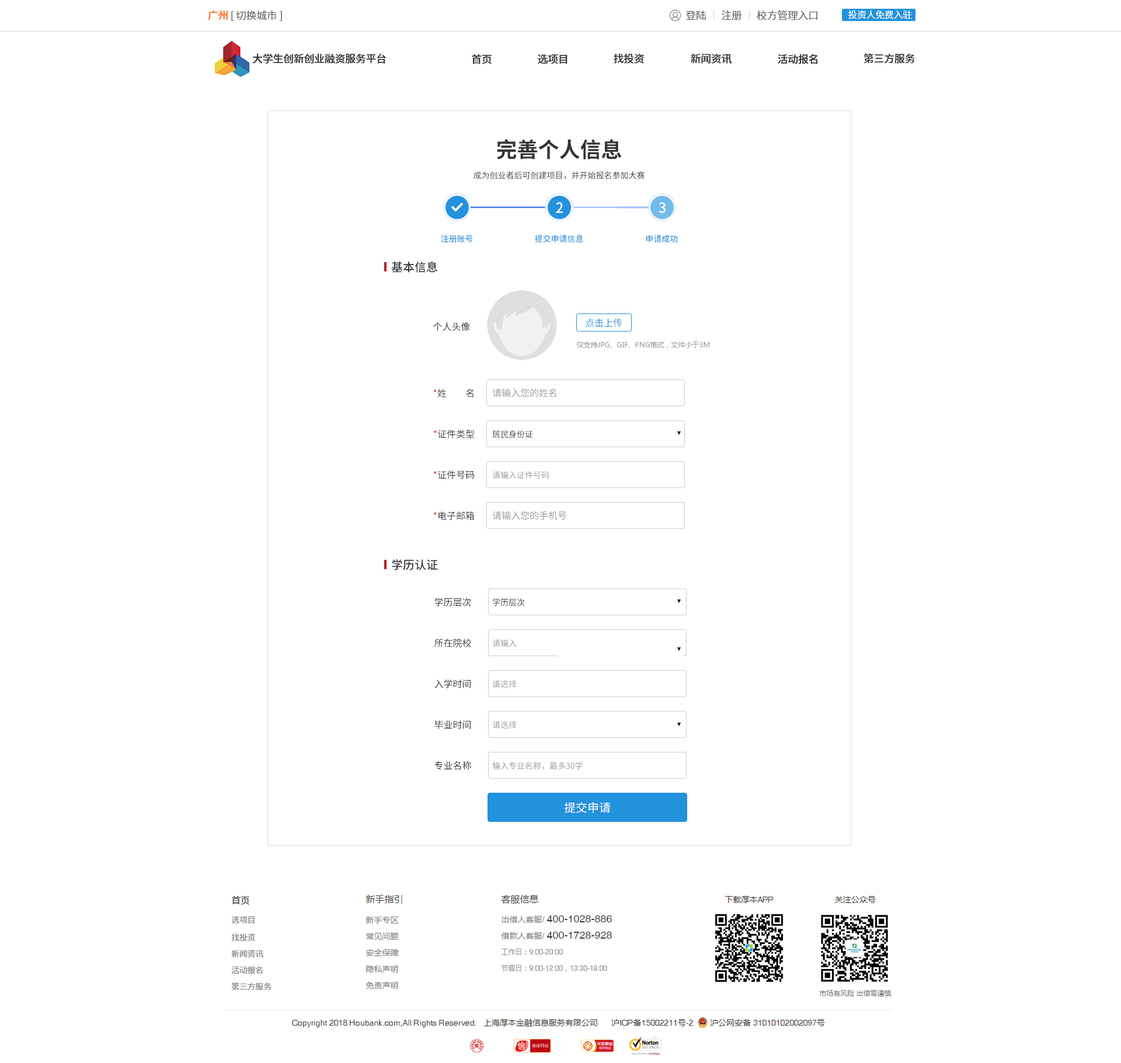
<style>
.page{position:relative;width:1121px;height:1063px;background:#ffffff}
.page>*{position:absolute;margin:0}
.t1{font:10.5px "SourceHanSansCN-Normal";letter-spacing:-0.02em;color:#666666}
.t2{font:10.5px "SourceHanSansCN-Medium";letter-spacing:-0.02em;color:#ff711b}
.t3{font:9.3px "SourceHanSansCN-Normal";letter-spacing:-0.02em;color:#ffffff}
.t4{font:10.5px "SourceHanSansCN-Medium";letter-spacing:-0.02em;color:#333333}
.t5{font:21px "SourceHanSansCN-Bold";color:#333333}
.t6{font:8.2px "SourceHanSansCN-Regular";color:#333333}
.t7{font:14px "SourceHanSansCN-Medium";color:#ffffff}
.t8{font:8.2px "SourceHanSansCN-Medium";color:#2292dd}
.t9{font:11.7px "SourceHanSansCN-Medium";color:#333333}
.t10{font:9.3px "SourceHanSansCN-Regular";color:#333333}
.t11{font:9.3px "SourceHanSansCN-Regular";color:#2292dd}
.t12{font:9.3px "SourceHanSansCN-Regular";color:#ff0000}
.t13{font:9.3px "SourceHanSansCN-Regular";color:#999999}
.t14{font:8.2px "SourceHanSansCN-Regular";color:#999999}
.t15{font:11.7px "SourceHanSansCN-Regular";color:#ffffff}
.t16{font:8.2px/16.4px "SourceHanSansCN-Normal";letter-spacing:-0.02em;color:#808080}
.t17{font:9.3px/19.9px "SourceHanSansCN-Normal";letter-spacing:-0.02em;color:#333333}
.t18{font:8.2px/19.3px "SourceHanSansCN-Normal";letter-spacing:-0.02em;color:#808080}
.t19{font:8.2px/17.5px "SourceHanSansCN-Normal";letter-spacing:-0.02em;color:#808080}
</style>
<div class="page">
<p class="t1" style="left:208px;top:10px;width:74px;height:11px"><span class="t2">广州</span> [切换城市]</p>
<p class="t1" style="left:686px;top:10px;width:132px;height:10px">登陆       注册       校方管理入口</p>
<p class="t3" style="left:848px;top:10px;width:64px;height:9px">投资人免费入驻</p>
<p class="t4" style="left:253px;top:54px;width:133px;height:10px">大学生创新创业融资服务平台</p>
<p class="t4" style="left:538px;top:54px;width:30px;height:10px">选项目</p>
<p class="t4" style="left:614px;top:53px;width:30px;height:11px">找投资</p>
<p class="t4" style="left:691px;top:54px;width:41px;height:10px">新闻资讯</p>
<p class="t4" style="left:778px;top:54px;width:40px;height:10px">活动报名</p>
<p class="t4" style="left:864px;top:53px;width:51px;height:11px">第三方服务</p>
<p class="t4" style="left:472px;top:54px;width:20px;height:10px">首页</p>
<p class="t5" style="left:497px;top:139px;width:124px;height:20px">完善个人信息</p>
<p class="t6" style="left:474px;top:171px;width:171px;height:8px">成为创业者后可创建项目，并开始报名参加大赛</p>
<p class="t7" style="left:556px;top:202px;width:7px;height:11px">2</p>
<p class="t7" style="left:659px;top:202px;width:7px;height:11px">3</p>
<p class="t8" style="left:441px;top:235px;width:32px;height:8px">注册账号</p>
<p class="t8" style="left:535px;top:235px;width:48px;height:8px">提交申请信息</p>
<p class="t8" style="left:646px;top:235px;width:32px;height:8px">申请成功</p>
<p class="t9" style="left:391px;top:262px;width:46px;height:11px">基本信息</p>
<p class="t10" style="left:433px;top:322px;width:37px;height:9px">个人头像</p>
<p class="t11" style="left:585px;top:318px;width:38px;height:10px">点击上传</p>
<p class="t10" style="left:433px;top:389px;width:41px;height:9px"><span class="t12">*</span>姓         名</p>
<p class="t13" style="left:492px;top:388px;width:65px;height:10px">请输入您的姓名</p>
<p class="t10" style="left:433px;top:430px;width:42px;height:9px"><span class="t12">*</span>证件类型</p>
<p class="t6" style="left:492px;top:430px;width:41px;height:9px">居民身份证</p>
<p class="t10" style="left:433px;top:471px;width:41px;height:8px"><span class="t12">*</span>证件号码</p>
<p class="t14" style="left:492px;top:471px;width:58px;height:8px">请输入证件号码</p>
<p class="t10" style="left:433px;top:512px;width:41px;height:8px"><span class="t12">*</span>电子邮箱</p>
<p class="t13" style="left:492px;top:511px;width:74px;height:9px">请输入您的手机号</p>
<p class="t9" style="left:392px;top:559px;width:46px;height:12px">学历认证</p>
<p class="t10" style="left:434px;top:598px;width:37px;height:9px">学历层次</p>
<p class="t6" style="left:493px;top:599px;width:32px;height:8px">学历层次</p>
<p class="t10" style="left:434px;top:639px;width:37px;height:9px">所在院校</p>
<p class="t14" style="left:492px;top:639px;width:25px;height:9px">请输入</p>
<p class="t10" style="left:434px;top:680px;width:37px;height:9px">入学时间</p>
<p class="t14" style="left:492px;top:680px;width:25px;height:8px">请选择</p>
<p class="t10" style="left:434px;top:721px;width:37px;height:8px">毕业时间</p>
<p class="t14" style="left:492px;top:721px;width:25px;height:8px">请选择</p>
<p class="t10" style="left:434px;top:762px;width:37px;height:8px">专业名称</p>
<p class="t14" style="left:492px;top:762px;width:91px;height:8px">输入专业名称，最多30字</p>
<p class="t15" style="left:564px;top:802px;width:47px;height:12px">提交申请</p>
<p class="t16" style="left:231px;top:896px;width:41px;height:95px"><span class="t17">首页 <br></span><span class="t18">选项目<br></span><span class="t19">找投资<br></span>新闻资讯<br>活动报名<br>第三方服务</p>
</div>
